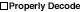
<style>
.page{position:relative;width:80px;height:12px;background:#ffffff}
.page>*{position:absolute;margin:0}
.t1{font:9px "Helvetica-Bold";color:#000000}
</style>
<div class="page">
<p class="t1" style="left:9px;top:2px;width:72px;height:9px">Properly Decode</p>
</div>
